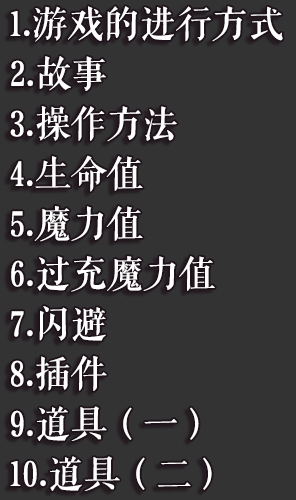
<style>
.page{position:relative;width:296px;height:500px;background:#333333}
.page>*{position:absolute;margin:0}
.t1{font:36px "FZQKBYSJW--GB1-0";color:#ffffff}
</style>
<div class="page">
<p class="t1" style="left:10px;top:6px;width:273px;height:36px">1.游戏的进行方式</p>
<p class="t1" style="left:11px;top:56px;width:95px;height:35px">2.故事</p>
<p class="t1" style="left:10px;top:106px;width:167px;height:36px">3.操作方法</p>
<p class="t1" style="left:10px;top:155px;width:133px;height:37px">4.生命值</p>
<p class="t1" style="left:11px;top:206px;width:132px;height:36px">5.魔力值</p>
<p class="t1" style="left:11px;top:256px;width:204px;height:36px">6.过充魔力值</p>
<p class="t1" style="left:11px;top:306px;width:95px;height:35px">7.闪避</p>
<p class="t1" style="left:11px;top:355px;width:96px;height:36px">8.插件</p>
<p class="t1" style="left:11px;top:406px;width:188px;height:35px">9.道具（一）</p>
<p class="t1" style="left:10px;top:456px;width:202px;height:35px">10.道具（二）</p>
</div>
